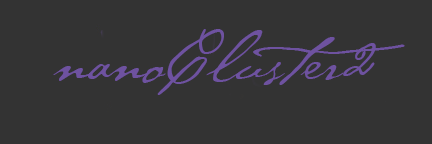
<style>
.page{position:relative;width:432px;height:144px;background:#333333}
.page>*{position:absolute;margin:0}
.t1{font:72px "P22CezanneRegular";color:#6e52a0}
</style>
<div class="page">
<p class="t1" style="left:53px;top:29px;width:352px;height:66px">nanoCluster2</p>
</div>
